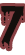
<style>
.page{position:relative;width:25px;height:55px;background:#ffffff}
.page>*{position:absolute;margin:0}
.t1{font:45.8px "CSNPWDTNFI";color:#130f0c}
</style>
<div class="page">
<p class="t1" style="left:1px;top:6px;width:23px;height:43px">7</p>
</div>
